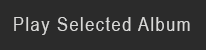
<style>
.page{position:relative;width:206px;height:50px;background:#2b2b2b}
.page>*{position:absolute;margin:0}
.t1{font:20px "ArialNarrow";letter-spacing:0.075em;color:#d9d9d8}
</style>
<div class="page">
<p class="t1" style="left:14px;top:17px;width:176px;height:18px">Play Selected Album</p>
</div>
